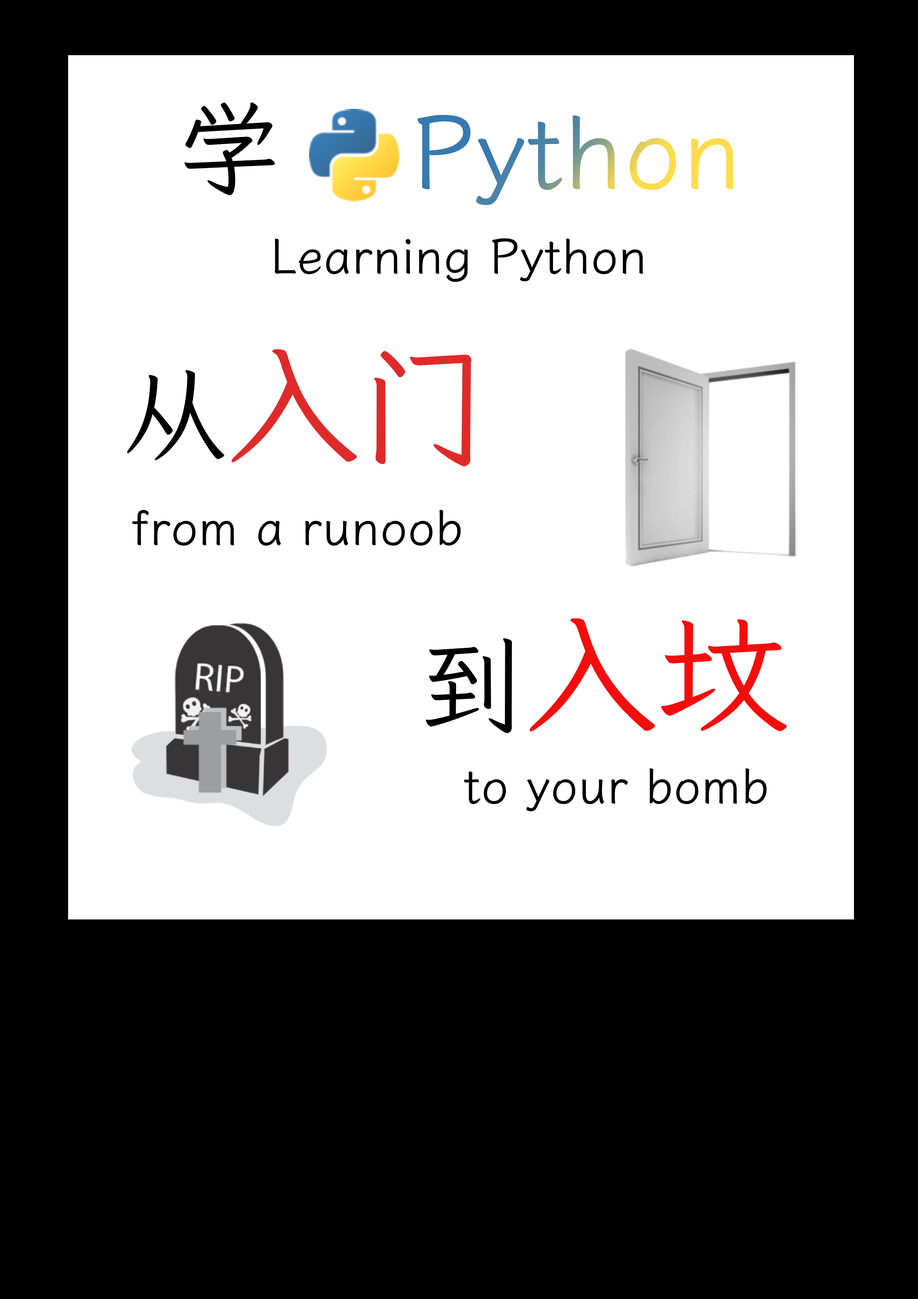
<style>
.page{position:relative;width:918px;height:1299px;background:#ffffff}
.page>*{position:absolute;margin:0}
.t1{font:103px "LXGWWenKai-Regular";color:#000000}
.t2{font:103px "LXGWWenKai-Regular"}
.t3{font:49.1px "LXGWWenKai-Regular";color:#000000}
.t4{font:132.4px "LXGWWenKai-Regular";color:#e02a2a}
.t5{font:132.5px "LXGWWenKai-Regular";color:#f50c0c}
.t6{font:102.9px "LXGWWenKai-Regular";color:#000000}
</style>
<div class="page">
<p class="t1" style="left:184px;top:102px;width:91px;height:93px">学</p>
<p class="t2" style="left:417px;top:115px;width:316px;height:90px">Python</p>
<p class="t3" style="left:275px;top:238px;width:368px;height:44px">Learning Python</p>
<p class="t4" style="left:127px;top:349px;width:345px;height:117px"><span class="t1">从</span>入门</p>
<p class="t3" style="left:132px;top:509px;width:329px;height:37px">from a runoob</p>
<p class="t5" style="left:426px;top:618px;width:361px;height:115px"><span class="t6">到</span>入坟</p>
<p class="t3" style="left:464px;top:768px;width:303px;height:43px">to your bomb</p>
</div>
